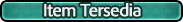
<style>
.page{position:relative;width:183px;height:22px}
.page>*{position:absolute;margin:0}
.t1{font:18px "AdobeClean-Regular";letter-spacing:-0.04em;color:#edeff1;font-weight:bold}
</style>
<div class="page">
<p class="t1" style="left:44px;top:3px;width:97px;height:14px">Item Tersedia</p>
</div>
